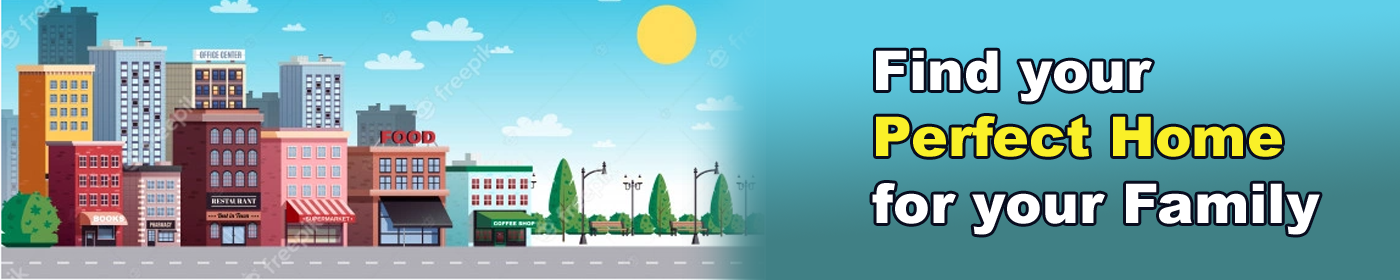
<style>
.page{position:relative;width:1400px;height:280px}
.page>*{position:absolute;margin:0}
.t1{font:55.1px "Arial-Black";color:#ffffff}
.t2{font:55.1px "Arial-Black";color:#faf028}
</style>
<div class="page">
<p class="t1" style="left:872px;top:50px;width:448px;height:185px">Find your<br><span class="t2">Perfect Home<br></span>for your Family</p>
</div>
